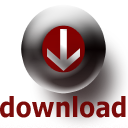
<style>
.page{position:relative;width:128px;height:128px;background:#ffffff}
.page>*{position:absolute;margin:0}
.t1{font:27.4px "Verdana-Bold";color:#7c0c0b;scale:0.85 1}
</style>
<div class="page">
<p class="t1" style="left:0px;top:96px;width:126px;height:22px">download</p>
</div>
